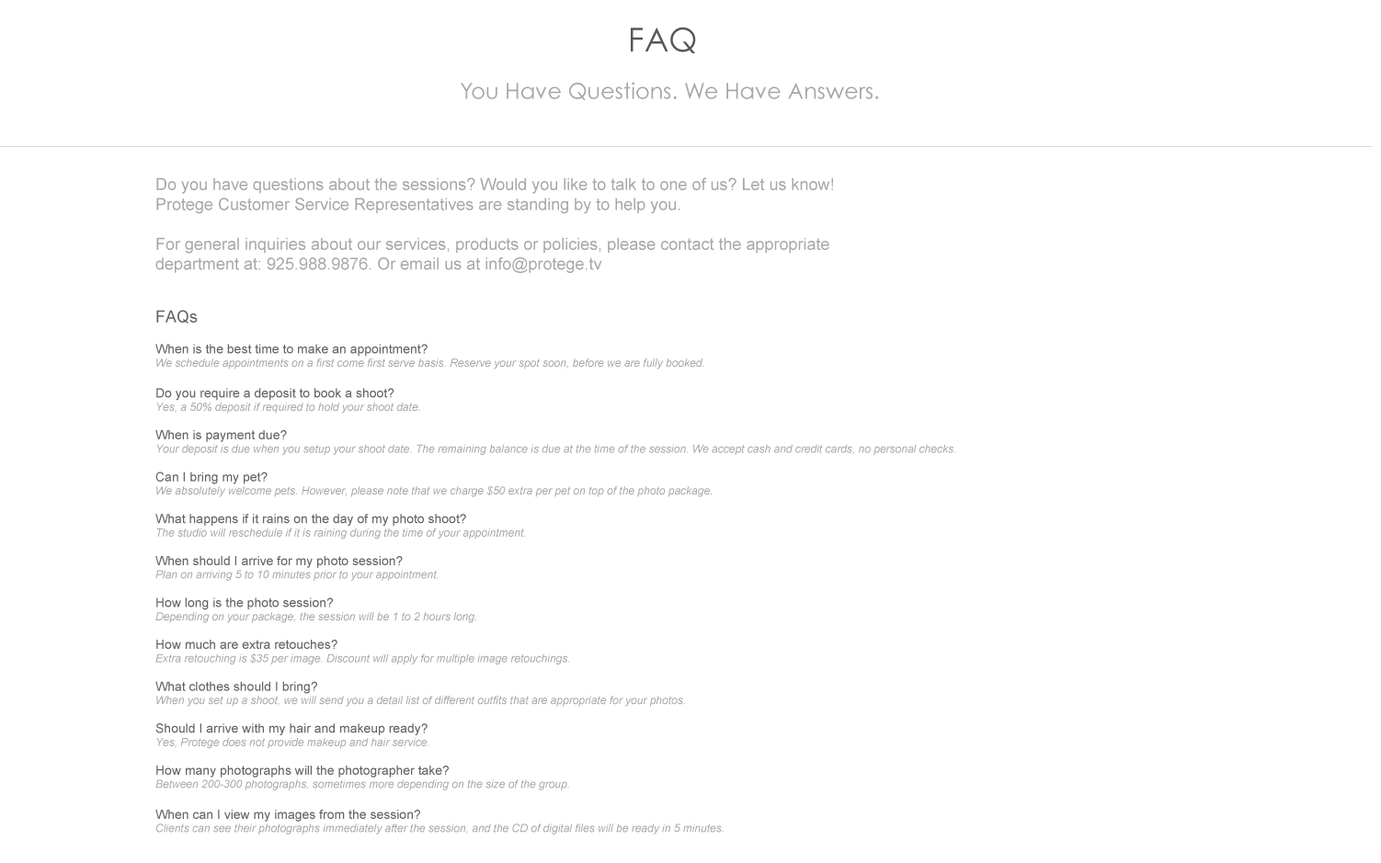
<style>
.page{position:relative;width:1381px;height:863px;background:#ffffff}
.page>*{position:absolute;margin:0}
.t1{font:33.1px "CenturyGothic";color:#585758}
.t2{font:22.1px "CenturyGothic";color:#a6a6a6}
.t3{font:16.6px "ArialMT";color:#a6a6a6}
.t4{font:16.6px "CenturyGothic";color:#a6a6a6}
.t5{font:16.6px "ArialMT";color:#636262}
.t6{font:12.9px "ArialMT";color:#636262}
.t7{font:11px "Arial-ItalicMT";color:#a6a6a6}
.t8{font:11px "ArialMT";color:#a6a6a6}
</style>
<div class="page">
<p class="t1" style="left:631px;top:27px;width:65px;height:26px">FAQ</p>
<p class="t2" style="left:461px;top:82px;width:418px;height:18px">You Have Questions. We Have Answers.</p>
<p class="t3" style="left:155px;top:177px;width:800px;height:658px"><span class="t4"><br></span>Do you have questions about the sessions? Would you like to talk to one of us? Let us know! <br>Protege Customer Service Representatives are standing by to help you.<br><br>For general inquiries about our services, products or policies, please contact the appropriate <br>department at: 925.988.9876. Or email us at info@protege.tv<br><br><span class="t5"><br>FAQs<br><br></span><span class="t6">When is the best time to make an appointment?<br></span><span class="t7">We schedule appointments on a first come first serve basis. Reserve your spot soon, before we are fully booked</span><span class="t8">.<br></span><span class="t6"><br>Do you require a deposit to book a shoot?<br></span><span class="t7">Yes, a 50% deposit if required to hold your shoot date.<br><br></span><span class="t6">When is payment due?<br></span><span class="t7">Your deposit is due when you setup your shoot date. The remaining balance is due at the time of the session. We accept cash and credit cards, no personal checks. <br><br></span><span class="t6">Can I bring my pet?<br></span><span class="t7">We absolutely welcome pets. However, please note that we charge $50 extra per pet on top of the photo package.<br><br></span><span class="t6">What happens if it rains on the day of my photo shoot?<br></span><span class="t7">The studio will reschedule if it is raining during the time of your appointment.<br><br></span><span class="t6">When should I arrive for my photo session?<br></span><span class="t7">Plan on arriving 5 to 10 minutes prior to your appointment.<br><br></span><span class="t6">How long is the photo session?<br></span><span class="t7">Depending on your package, the session will be 1 to 2 hours long.<br><br></span><span class="t6">How much are extra retouches?<br></span><span class="t7">Extra retouching is $35 per image. Discount will apply for multiple image retouchings.<br>    <br></span><span class="t6">What clothes should I bring?<br></span><span class="t7">When you set up a shoot, we will send you a detail list of different outfits that are appropriate for your photos.<br>    <br></span><span class="t6">Should I arrive with my hair and makeup ready?<br></span><span class="t7">Yes, Protege does not provide makeup and hair service.<br><br></span><span class="t6">How many photographs will the photographer take?<br></span><span class="t7">Between 200-300 photographs, sometimes more depending on the size of the group.<br><br></span><span class="t6">When can I view my images from the session?<br></span><span class="t7">Clients can see their photographs immediately after the session, and the CD of digital files will be ready in 5 minutes.</span></p>
</div>
